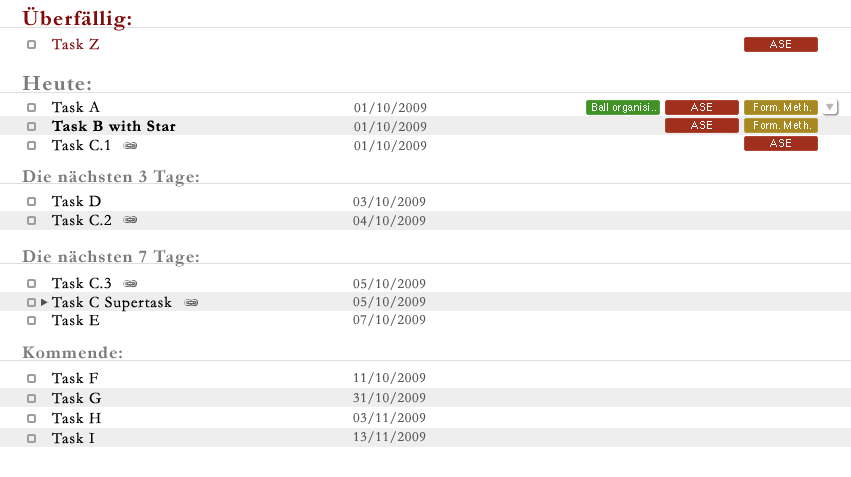
<style>
.page{position:relative;width:851px;height:477px;background:#ffffff}
.page>*{position:absolute;margin:0}
.t1{font:22px "Garamond-Bold";letter-spacing:0.05em;color:#820a0a}
.t2{font:16px "Garamond";letter-spacing:0.05em;color:#820a0a}
.t3{font:22px "Garamond-Bold";letter-spacing:0.05em;color:#7b7b7b}
.t4{font:16px "Garamond";letter-spacing:0.05em;color:#000000}
.t5{font:14px "Garamond";letter-spacing:0.05em;color:#5a5656}
.t6{font:16px "Garamond-Bold";letter-spacing:0.05em;color:#000000}
.t7{font:18px "Garamond-Bold";letter-spacing:0.05em;color:#7b7b7b}
</style>
<div class="page">
<p class="t1" style="left:22px;top:7px;width:109px;height:24px">Überfällig:</p>
<p class="t2" style="left:51px;top:38px;width:48px;height:12px">Task Z</p>
<p class="t3" style="left:22px;top:76px;width:69px;height:15px">Heute:</p>
<p class="t4" style="left:51px;top:101px;width:49px;height:12px">Task A</p>
<p class="t5" style="left:354px;top:102px;width:73px;height:12px">01/10/2009</p>
<p class="t6" style="left:51px;top:120px;width:125px;height:12px">Task B with Star</p>
<p class="t5" style="left:354px;top:121px;width:73px;height:12px">01/10/2009</p>
<p class="t4" style="left:51px;top:139px;width:59px;height:12px">Task C.1</p>
<p class="t5" style="left:354px;top:140px;width:73px;height:12px">01/10/2009</p>
<p class="t7" style="left:22px;top:169px;width:177px;height:18px">Die nächsten 3 Tage:</p>
<p class="t4" style="left:51px;top:195px;width:50px;height:12px">Task D</p>
<p class="t5" style="left:353px;top:196px;width:73px;height:12px">03/10/2009</p>
<p class="t4" style="left:51px;top:214px;width:60px;height:12px">Task C.2</p>
<p class="t5" style="left:353px;top:215px;width:73px;height:12px">04/10/2009</p>
<p class="t7" style="left:22px;top:249px;width:177px;height:18px">Die nächsten 7 Tage:</p>
<p class="t4" style="left:51px;top:277px;width:60px;height:12px">Task C.3</p>
<p class="t5" style="left:353px;top:278px;width:73px;height:12px">05/10/2009</p>
<p class="t4" style="left:51px;top:296px;width:121px;height:16px">Task C Supertask</p>
<p class="t5" style="left:353px;top:296px;width:73px;height:12px">05/10/2009</p>
<p class="t4" style="left:51px;top:314px;width:49px;height:12px">Task E</p>
<p class="t5" style="left:353px;top:314px;width:73px;height:12px">07/10/2009</p>
<p class="t7" style="left:22px;top:346px;width:100px;height:13px">Kommende:</p>
<p class="t4" style="left:51px;top:372px;width:47px;height:12px">Task F</p>
<p class="t5" style="left:354px;top:372px;width:72px;height:12px">11/10/2009</p>
<p class="t4" style="left:51px;top:392px;width:51px;height:12px">Task G</p>
<p class="t5" style="left:353px;top:392px;width:73px;height:12px">31/10/2009</p>
<p class="t4" style="left:51px;top:412px;width:50px;height:12px">Task H</p>
<p class="t5" style="left:353px;top:412px;width:73px;height:12px">03/11/2009</p>
<p class="t4" style="left:51px;top:432px;width:44px;height:12px">Task I</p>
<p class="t5" style="left:354px;top:431px;width:72px;height:12px">13/11/2009</p>
</div>
